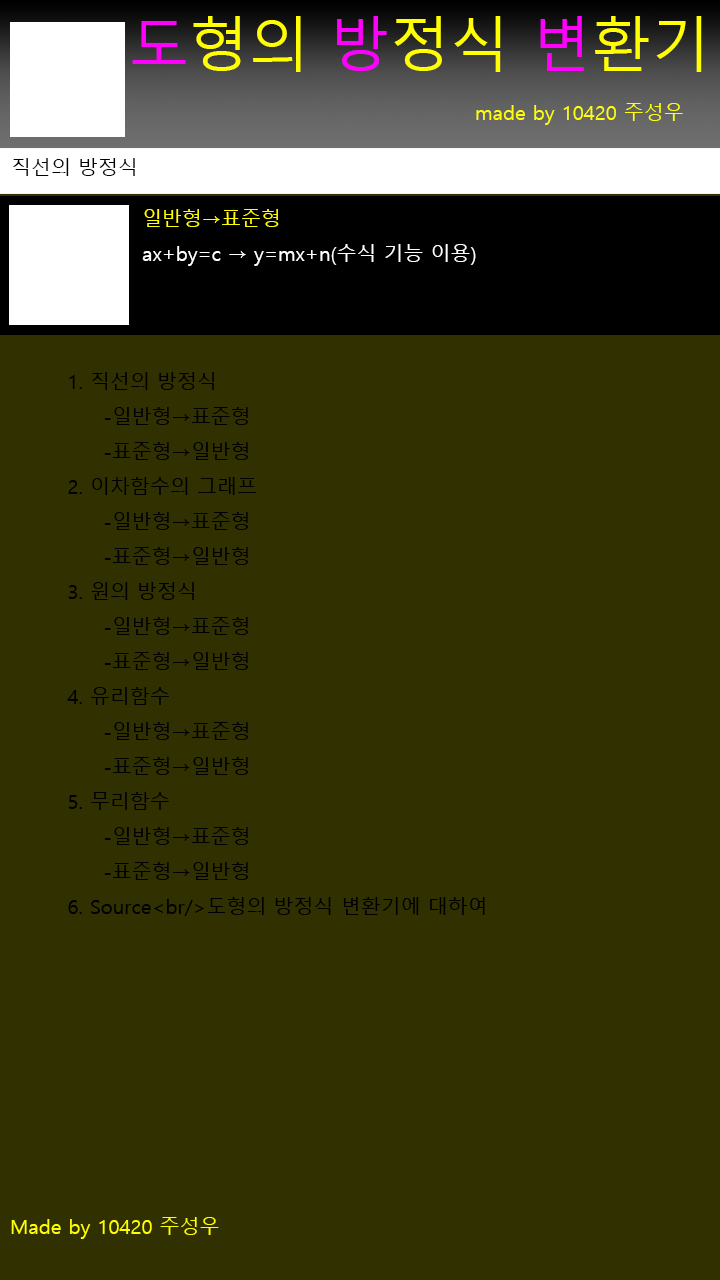
<style>
.page{position:relative;width:720px;height:1280px;background:#303000}
.page>*{position:absolute;margin:0}
.t1{font:60px "MalgunGothic";color:#ffff00}
.t2{font:60px "MalgunGothic";color:#ff00ff}
.t3{font:20px "MalgunGothic";color:#ffff00}
.t4{font:20px "MalgunGothic";color:#000000}
.t5{font:20px "MalgunGothic";color:#ffffff}
</style>
<div class="page">
<p class="t1" style="left:132px;top:16px;width:570px;height:56px"><span class="t2">도</span>형의 <span class="t2">방</span>정식 <span class="t2">변</span>환기</p>
<p class="t3" style="left:476px;top:103px;width:207px;height:22px">made by 10420 주성우</p>
<p class="t4" style="left:13px;top:158px;width:122px;height:18px">직선의 방정식</p>
<p class="t5" style="left:142px;top:209px;width:334px;height:57px"><span class="t3">일반형→표준형<br></span>ax+by=c → y=mx+n(수식 기능 이용)</p>
<p class="t4" style="left:67px;top:372px;width:418px;height:544px">1. 직선의 방정식<br> -일반형→표준형<br> -표준형→일반형<br>2. 이차함수의 그래프<br> -일반형→표준형<br> -표준형→일반형<br>3. 원의 방정식<br> -일반형→표준형<br> -표준형→일반형<br>4. 유리함수<br> -일반형→표준형<br> -표준형→일반형<br>5. 무리함수<br> -일반형→표준형<br> -표준형→일반형<br>6. Source&lt;br/&gt;도형의 방정식 변환기에 대하여</p>
<p class="t3" style="left:11px;top:1217px;width:208px;height:22px">Made by 10420 주성우</p>
</div>
